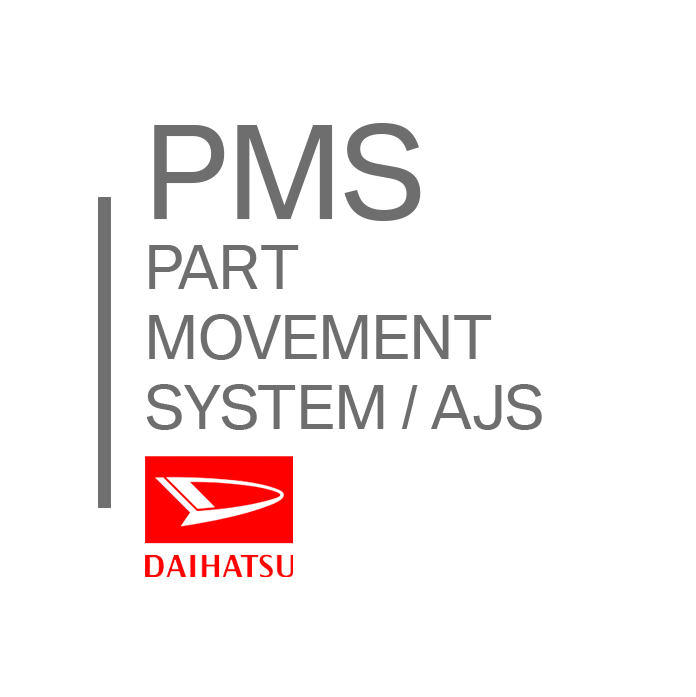
<style>
.page{position:relative;width:696px;height:697px;background:#ffffff}
.page>*{position:absolute;margin:0}
.t1{font:58.3px "BMWGroup-Regular";color:#6e6e6e}
.t2{font:125px "BMWGroup-Regular";color:#6e6e6e}
</style>
<div class="page">
<p class="t1" style="left:146px;top:123px;width:396px;height:307px"><span class="t2">PMS<br></span>PART<br>MOVEMENT<br>SYSTEM / AJS</p>
</div>
